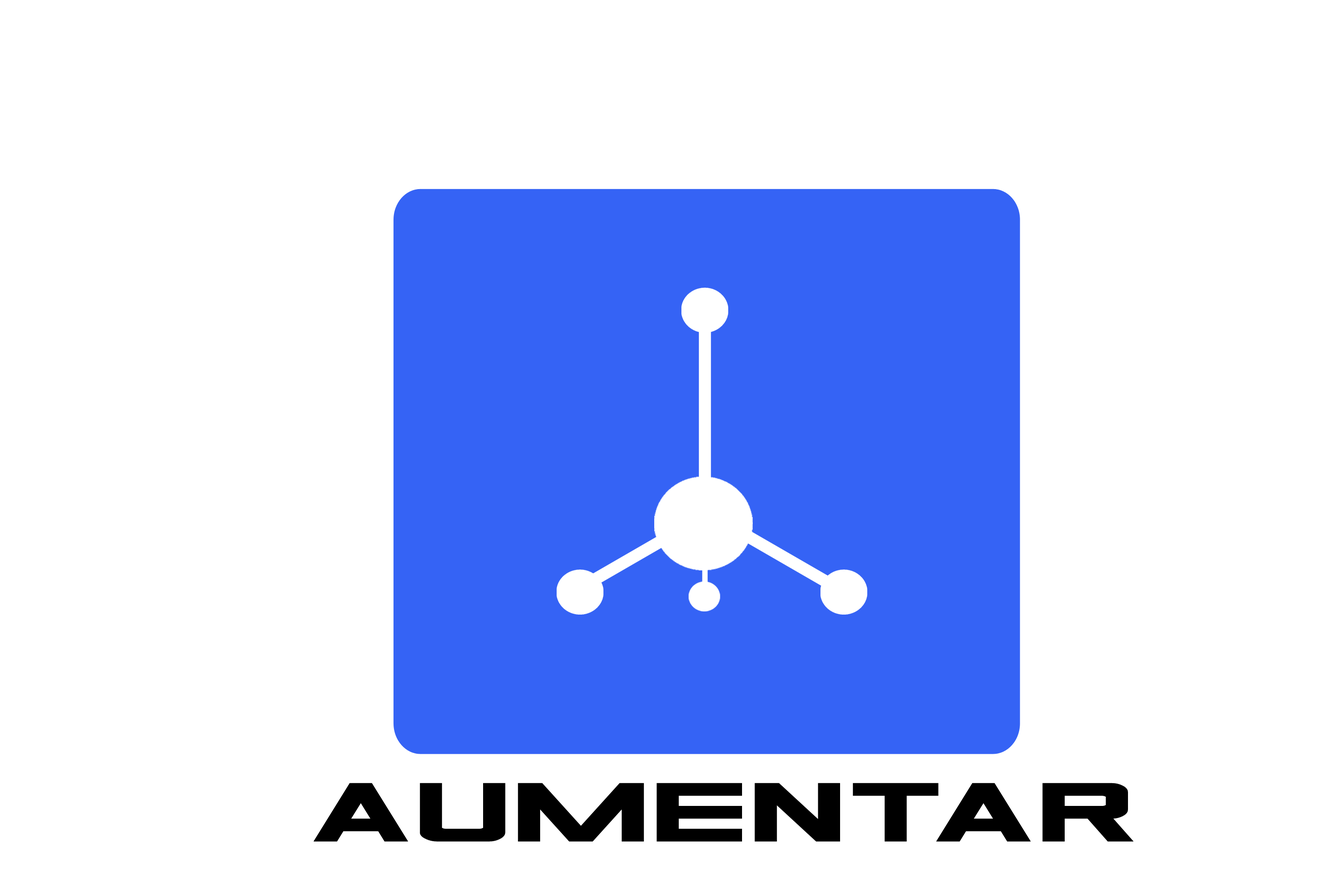
<style>
.page{position:relative;width:1337px;height:892px;background:#ffffff}
.page>*{position:absolute;margin:0}
.t1{font:69.1px "GRATIS";color:#000000;font-weight:bold;scale:1.94 1}
</style>
<div class="page">
<p class="t1" style="left:313px;top:782px;width:821px;height:59px">AUMENTAR</p>
</div>
